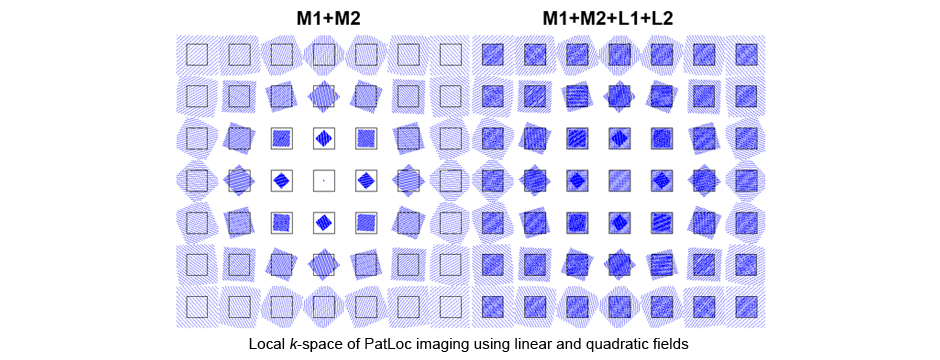
<style>
.page{position:relative;width:940px;height:360px;background:#ffffff}
.page>*{position:absolute;margin:0}
.t1{font:15.3px "ArialMT";color:#000000}
.t2{font:15.3px "Arial-ItalicMT";color:#000000}
</style>
<div class="page">
<p class="t1" style="left:249px;top:338px;width:440px;height:14px">Local <span class="t2">k</span>-space of PatLoc imaging using linear and quadratic fields</p>
</div>
